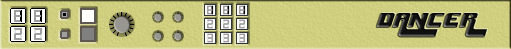
<style>
.page{position:relative;width:511px;height:49px}
.page>*{position:absolute;margin:0}
.t1{font:30px "HuskyStash";color:#10100f}
</style>
<div class="page">
<p class="t1" style="left:376px;top:13px;width:111px;height:24px">DANCER</p>
</div>
